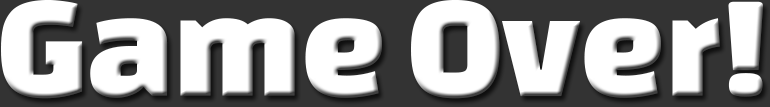
<style>
.page{position:relative;width:770px;height:107px;background:#ffffff}
.page>*{position:absolute;margin:0}
.t1{font:150px "ChangaOne";color:#ffffff}
</style>
<div class="page">
<p class="t1" style="left:1px;top:0px;width:762px;height:99px">Game Over!</p>
</div>
